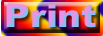
<style>
.page{position:relative;width:103px;height:36px}
.page>*{position:absolute;margin:0}
.t1{font:31.8px "Arial-Black";scale:1.12 1}
</style>
<div class="page">
<p class="t1" style="left:6px;top:4px;width:90px;height:24px">Print</p>
</div>
